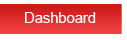
<style>
.page{position:relative;width:127px;height:40px;background:#ffffff}
.page>*{position:absolute;margin:0}
.t1{font:14.7px "ArialMT";color:#ffffff}
</style>
<div class="page">
<p class="t1" style="left:25px;top:12px;width:71px;height:11px">Dashboard</p>
</div>
